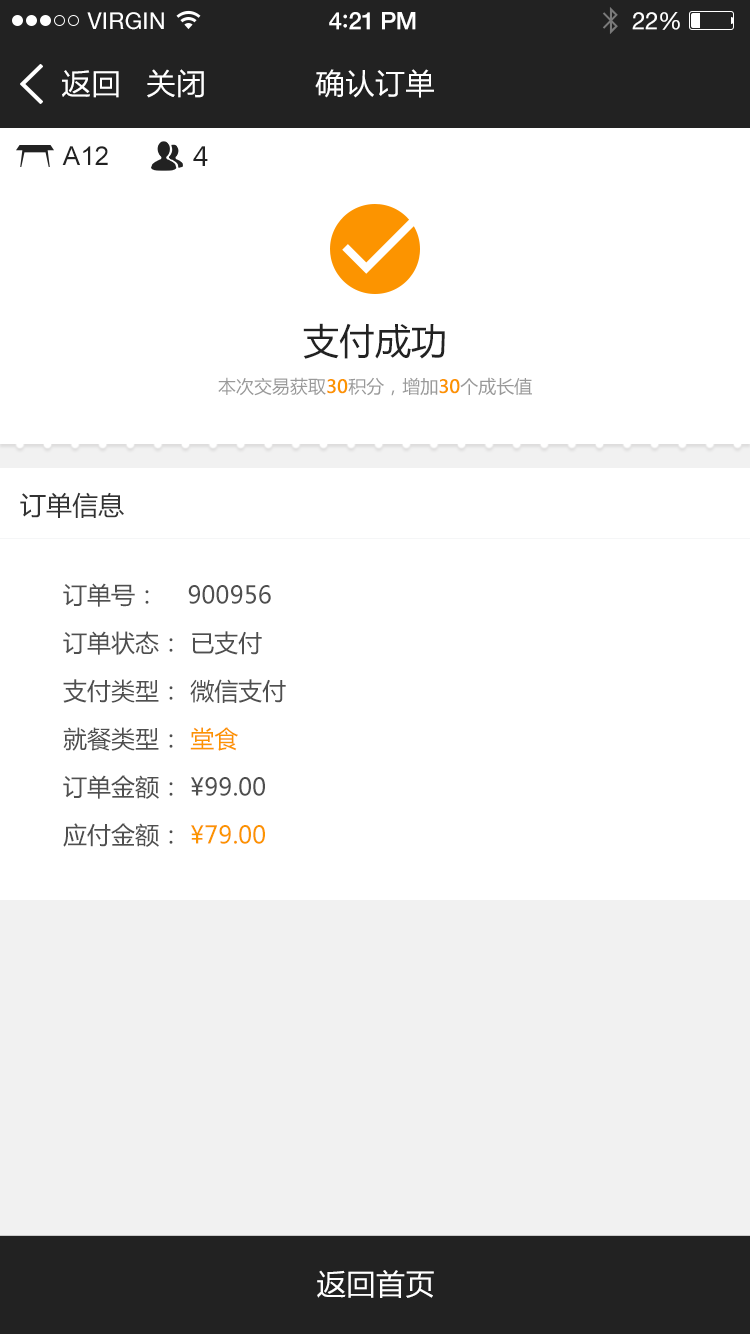
<style>
.page{position:relative;width:750px;height:1334px;background:#ffffff}
.page>*{position:absolute;margin:0}
.t1{font:23px "HelveticaNeue";letter-spacing:0.02em;color:#ffffff}
.t2{font:24px "HelveticaNeue-Medium";letter-spacing:-0.02em;color:#ffffff}
.t3{font:26px "Avenir-Medium";letter-spacing:-0.02em;color:#ffffff}
.t4{font:24px "HelveticaNeue";letter-spacing:-0.02em;color:#ffffff}
.t5{font:30px "FZLTHK--GBK1-0";color:#ffffff}
.t6{font:26px "ArialMT";color:#222222}
.t7{font:26px "MicrosoftYaHei";color:#222222}
.t8{font:36px "MicrosoftYaHei";color:#222222}
.t9{font:18px "MicrosoftYaHei";color:#999999}
.t10{font:18px "MicrosoftYaHei";color:#fc9400;font-weight:bold}
.t11{font:26px "MicrosoftYaHei";color:#333333}
.t12{font:24px/48px "MicrosoftYaHei";color:#4f4f4f}
.t13{font:24px/48px "MicrosoftYaHei";color:#fc9400}
.t14{font:30px "FZLTHK--GBK1-0";letter-spacing:-0.01em;color:#ffffff}
</style>
<div class="page">
<p class="t1" style="left:87px;top:12px;width:77px;height:18px">VIRGIN</p>
<p class="t2" style="left:329px;top:12px;width:87px;height:18px">4<span class="t3">:</span>21 PM</p>
<p class="t4" style="left:632px;top:12px;width:48px;height:18px">22%</p>
<p class="t5" style="left:62px;top:70px;width:57px;height:28px">返回</p>
<p class="t5" style="left:147px;top:69px;width:57px;height:29px">关闭</p>
<p class="t5" style="left:315px;top:69px;width:119px;height:29px">确认订单</p>
<p class="t6" style="left:62px;top:146px;width:46px;height:19px">A12</p>
<p class="t7" style="left:193px;top:146px;width:15px;height:20px">4</p>
<p class="t8" style="left:303px;top:323px;width:142px;height:36px">支付成功</p>
<p class="t9" style="left:218px;top:377px;width:314px;height:19px">本次交易获取<span class="t10">30</span>积分，增加<span class="t10">30</span>个成长值</p>
<p class="t11" style="left:20px;top:492px;width:104px;height:26px">订单信息</p>
<p class="t12" style="left:63px;top:583px;width:223px;height:264px">订单号：    900956<br>订单状态： 已支付<br>支付类型： 微信支付<br>就餐类型： <span class="t13">堂食<br></span>订单金额： ¥99.00<br>应付金额： <span class="t13">¥79.00</span></p>
<p class="t14" style="left:317px;top:1270px;width:117px;height:28px">返回首页</p>
</div>
